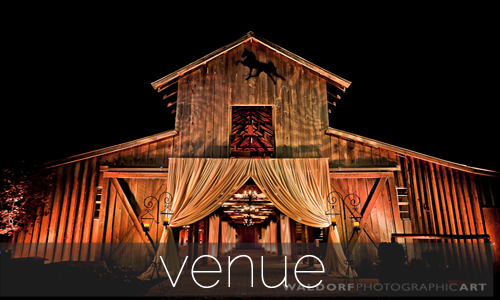
<style>
.page{position:relative;width:500px;height:300px;background:#000000}
.page>*{position:absolute;margin:0}
.t1{font:60px "Raleway-Thin";color:#fffefe}
</style>
<div class="page">
<p class="t1" style="left:159px;top:254px;width:166px;height:35px">venue</p>
</div>
